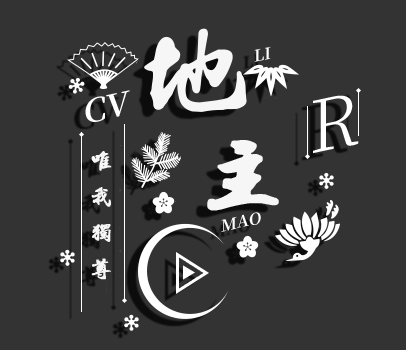
<style>
.page{position:relative;width:406px;height:350px;background:#333333}
.page>*{position:absolute;margin:0}
.t1{font:125px "SunYatsenHsingshu-";color:#f6f6f6;font-weight:bold}
.t2{font:97.3px "SunYatsenHsingshu-";color:#f6f6f6;font-weight:bold}
.t3{font:24px/18px "SunYatsenHsingshu-";color:#f6f6f6;font-weight:bold}
</style>
<div class="page">
<p class="t1" style="left:144px;top:28px;width:103px;height:84px">地</p>
<p class="t2" style="left:207px;top:140px;width:72px;height:71px">主</p>
<p class="t3" style="left:91px;top:151px;width:21px;height:129px">唯<br><br>我<br><br>独<br><br>尊</p>
</div>
